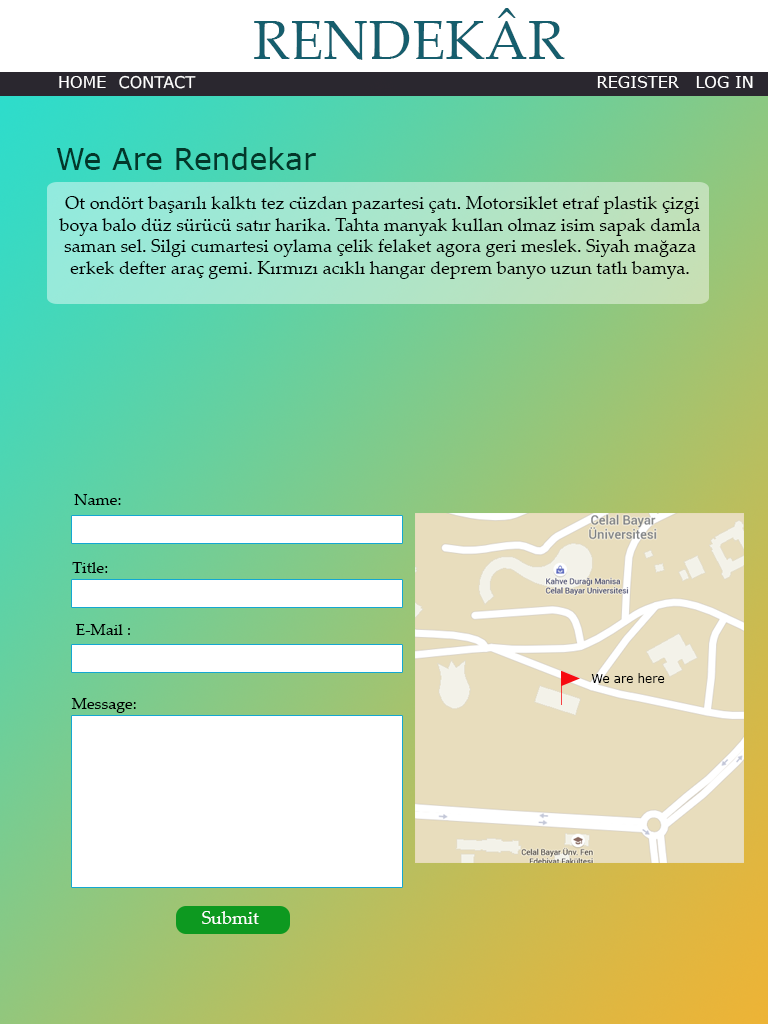
<style>
.page{position:relative;width:768px;height:1024px}
.page>*{position:absolute;margin:0}
.t1{font:55px "PalatinoLinotype-Roman";color:#165e6d}
.t2{font:16px "Verdana";color:#ffffff}
.t3{font:30px "Verdana";color:#03372a}
.t4{font:18px "PalatinoLinotype-Roman";color:#000000}
.t5{font:16px "PalatinoLinotype-Roman";color:#000000}
.t6{font:12px "Verdana";color:#000000}
.t7{font:18px "PalatinoLinotype-Roman";color:#ffffff}
</style>
<div class="page">
<p class="t1" style="left:254px;top:8px;width:311px;height:52px">RENDEKÂR</p>
<p class="t2" style="left:59px;top:76px;width:47px;height:12px">HOME</p>
<p class="t2" style="left:119px;top:75px;width:77px;height:14px">CONTACT</p>
<p class="t2" style="left:597px;top:76px;width:82px;height:12px">REGISTER</p>
<p class="t2" style="left:696px;top:76px;width:57px;height:12px">LOG IN</p>
<p class="t3" style="left:56px;top:147px;width:260px;height:23px">We Are Rendekar</p>
<p class="t4" style="left:59px;top:196px;width:642px;height:83px;text-align:center">Ot ondört başarılı kalktı tez cüzdan pazartesi çatı. Motorsiklet etraf plastik çizgi boya balo düz sürücü satır harika. Tahta manyak kullan olmaz isim sapak damla saman sel. Silgi cumartesi oylama çelik felaket agora geri meslek. Siyah mağaza erkek defter araç gemi. Kırmızı acıklı hangar deprem banyo uzun tatlı bamya.</p>
<p class="t5" style="left:74px;top:494px;width:47px;height:11px">Name:</p>
<p class="t5" style="left:72px;top:562px;width:36px;height:11px">Title:</p>
<p class="t5" style="left:76px;top:624px;width:54px;height:11px">E-Mail :</p>
<p class="t6" style="left:591px;top:673px;width:74px;height:10px">We are here</p>
<p class="t5" style="left:71px;top:698px;width:65px;height:15px">Message:</p>
<p class="t7" style="left:202px;top:911px;width:57px;height:13px">Submit</p>
</div>
